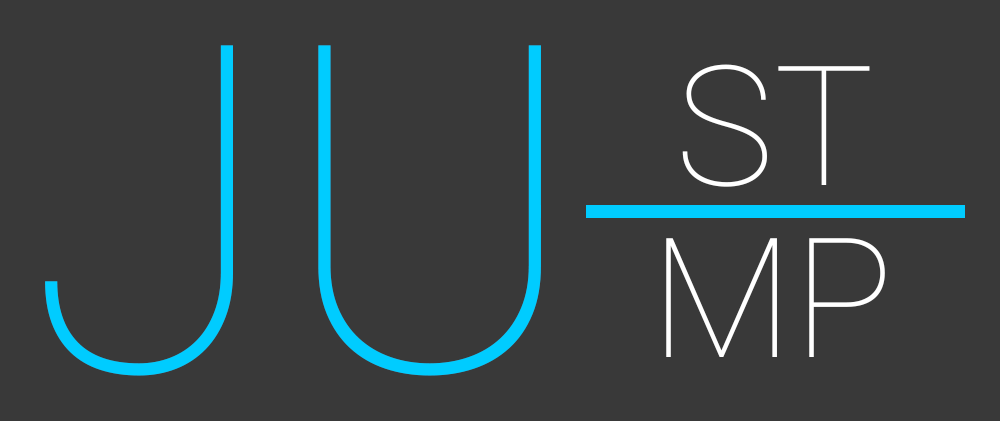
<style>
.page{position:relative;width:1000px;height:421px;background:#393939}
.page>*{position:absolute;margin:0}
.t1{font:458.3px "Roboto-Thin";color:#00ccff}
.t2{font:166.7px "Roboto-Thin";color:#ffffff}
</style>
<div class="page">
<p class="t1" style="left:45px;top:45px;width:496px;height:331px">JU</p>
<p class="t2" style="left:682px;top:64px;width:188px;height:123px">ST</p>
<p class="t2" style="left:666px;top:238px;width:219px;height:119px">MP</p>
</div>
